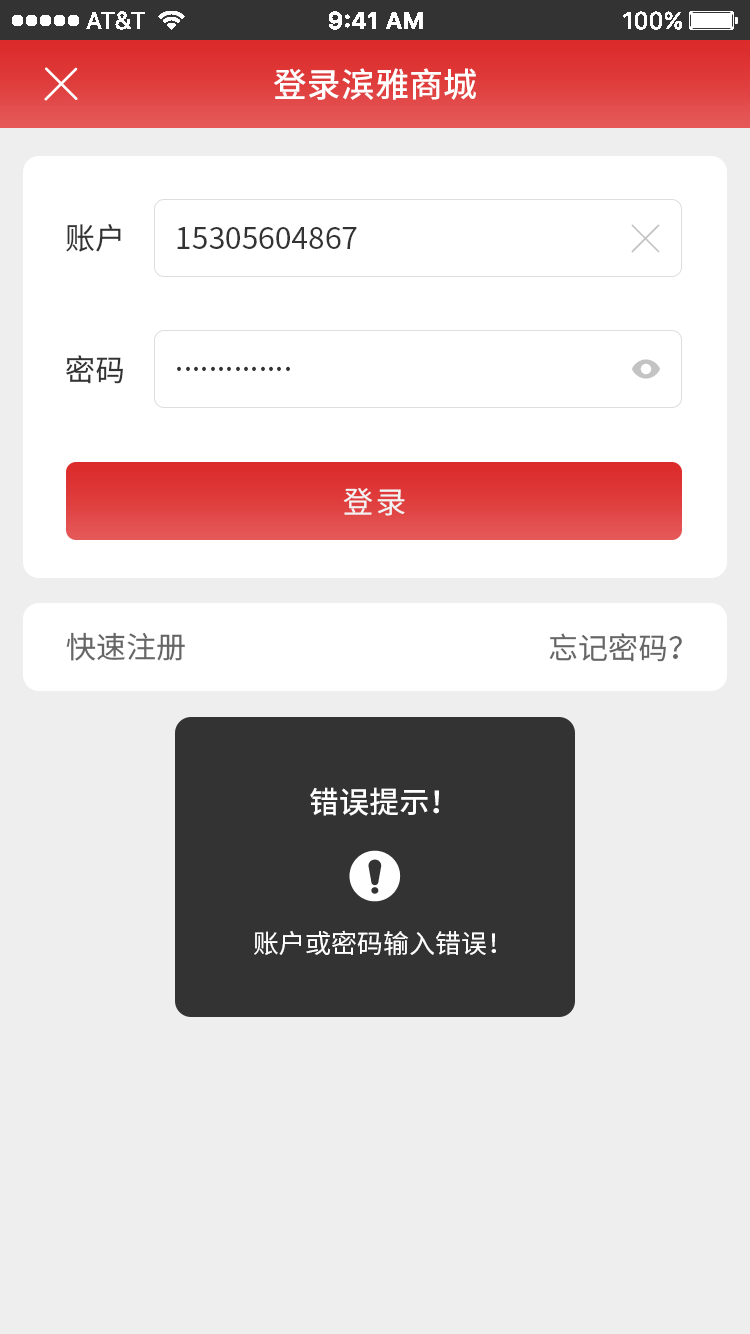
<style>
.page{position:relative;width:750px;height:1334px;background:#eeeeee}
.page>*{position:absolute;margin:0}
.t1{font:34px "SourceHanSansCN-Medium";color:#ffffff}
.t2{font:30px "SourceHanSansCN-Regular";color:#333333}
.t3{font:30px "SourceHanSansCN-Regular";letter-spacing:0.1em;color:#f2f2f2}
.t4{font:30px "SourceHanSansCN-Regular";color:#666666}
.t5{font:30px "SourceHanSansCN-Medium";color:#ffffff}
.t6{font:26px "SourceHanSansCN-Regular";color:#ffffff}
</style>
<div class="page">
<p class="t1" style="left:274px;top:68px;width:202px;height:32px">登录滨雅商城</p>
<p class="t2" style="left:66px;top:223px;width:55px;height:29px">账户</p>
<p class="t2" style="left:177px;top:227px;width:180px;height:22px">15305604867</p>
<p class="t2" style="left:66px;top:355px;width:57px;height:29px">密码</p>
<p class="t2" style="left:177px;top:366px;width:113px;height:5px">..............</p>
<p class="t3" style="left:343px;top:488px;width:62px;height:28px">登录</p>
<p class="t4" style="left:66px;top:632px;width:119px;height:29px">快速注册</p>
<p class="t4" style="left:549px;top:633px;width:133px;height:29px">忘记密码？</p>
<p class="t5" style="left:310px;top:787px;width:129px;height:29px">错误提示！</p>
<p class="t6" style="left:254px;top:930px;width:242px;height:26px">账户或密码输入错误！</p>
</div>
